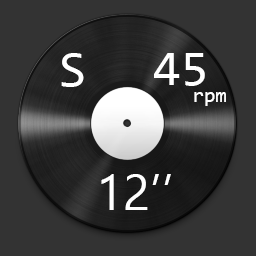
<style>
.page{position:relative;width:256px;height:256px;background:#333333}
.page>*{position:absolute;margin:0}
.t1{font:50px "Consolas";color:#ffffff}
.t2{font:20.8px "Consolas";color:#ffffff}
.t3{font:50px "Ebrima";color:#ffffff}
</style>
<div class="page">
<p class="t1" style="left:61px;top:53px;width:23px;height:34px">S</p>
<p class="t1" style="left:154px;top:53px;width:51px;height:33px">45</p>
<p class="t2" style="left:194px;top:92px;width:32px;height:14px">rpm</p>
<p class="t3" style="left:101px;top:174px;width:70px;height:36px">12’’</p>
</div>
